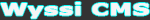
<style>
.page{position:relative;width:150px;height:20px;background:#333333}
.page>*{position:absolute;margin:0}
.t1{font:17.1px "Verdana-Bold";color:#f4f4f4;font-weight:bold;scale:1.39 1}
</style>
<div class="page">
<p class="t1" style="left:0px;top:2px;width:149px;height:17px">Wyssi CMS</p>
</div>
